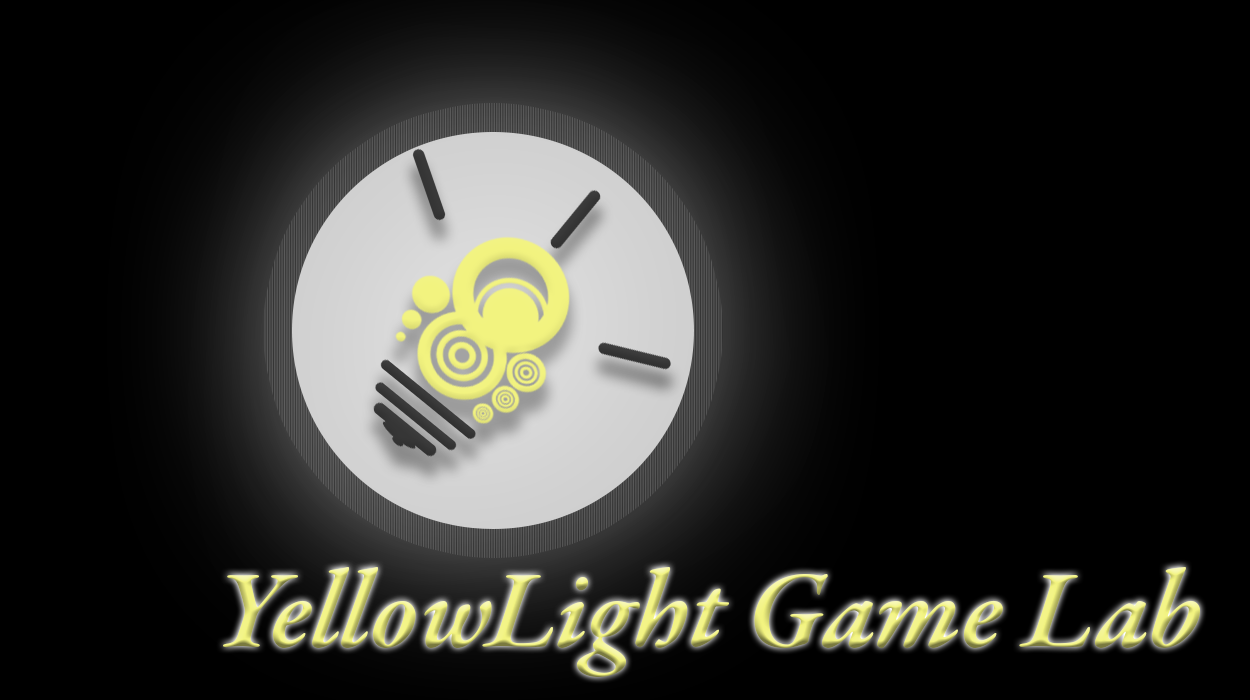
<style>
.page{position:relative;width:1250px;height:700px;background:#000000}
.page>*{position:absolute;margin:0}
.t1{font:112px "GaramondPremrPro-SmbdIt"}
</style>
<div class="page">
<p class="t1" style="left:223px;top:567px;width:977px;height:111px">YellowLight Game Lab</p>
</div>
